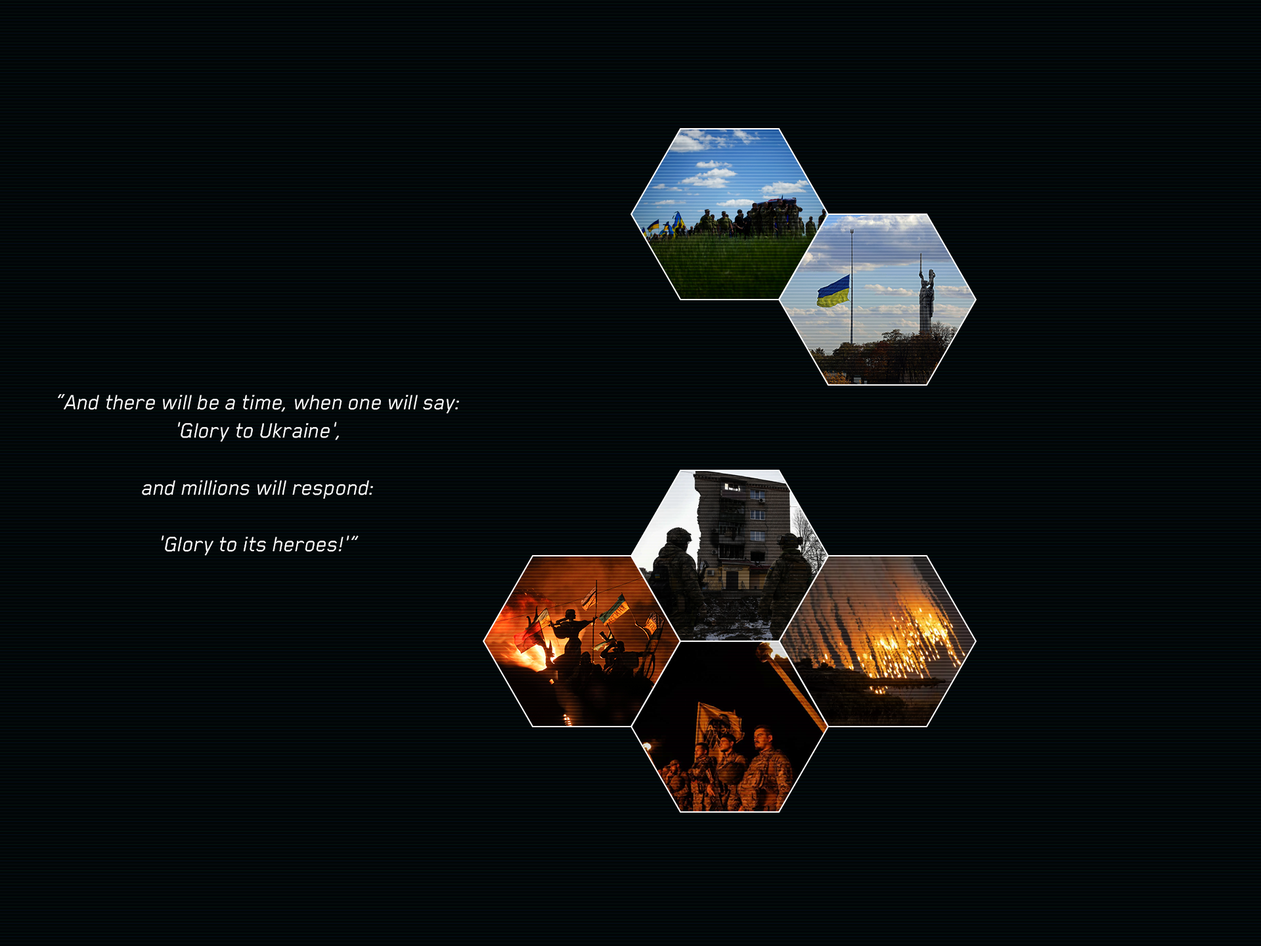
<style>
.page{position:relative;width:1261px;height:946px}
.page>*{position:absolute;margin:0}
.t1{font:23.6px "BlenderPro-BookItalic";color:#ffffff}
</style>
<div class="page">
<p class="t1" style="left:58px;top:393px;width:401px;height:163px;text-align:center">“And there will be a time, when one will say:<br>'Glory to Ukraine',<br><br>and millions will respond:<br><br>'Glory to its heroes!'”</p>
</div>
